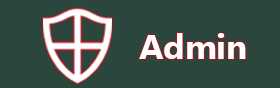
<style>
.page{position:relative;width:280px;height:88px;background:#2b463c}
.page>*{position:absolute;margin:0}
.t1{font:34.1px "Gadugi-Bold";color:#ffffff}
</style>
<div class="page">
<p class="t1" style="left:139px;top:33px;width:107px;height:26px">Admin</p>
</div>
